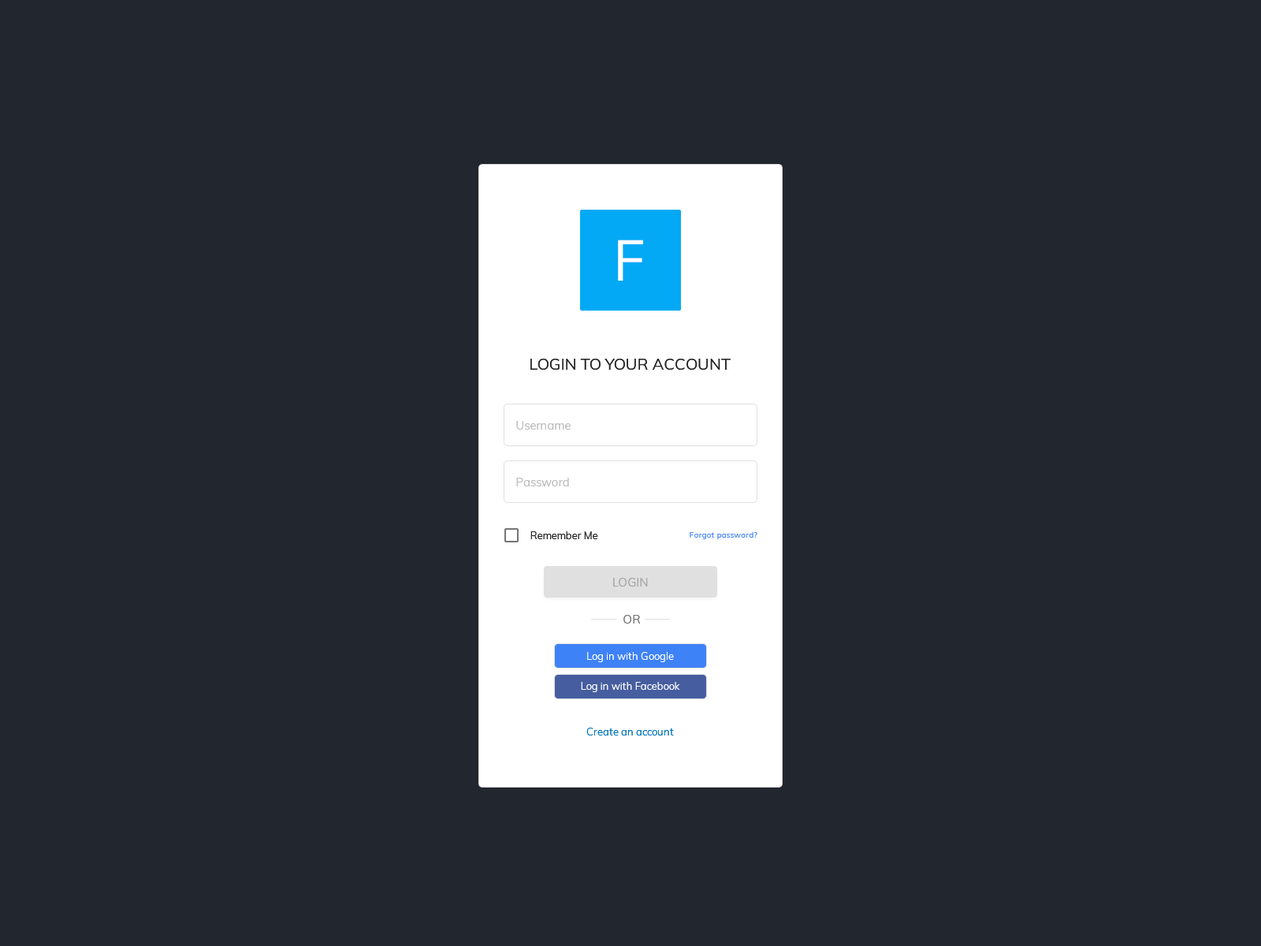
<style>
.page{position:relative;width:1261px;height:946px;background:#22262f}
.page>*{position:absolute;margin:0}
.t1{font:56.7px "Muli-Regular";color:#ffffff}
.t2{font:15.8px "Muli-Regular";color:#212121}
.t3{font:11.8px "Muli-Regular";color:#bdbdbd}
.t4{font:10.2px "Muli-Regular";color:#212121}
.t5{font:7.9px "Muli-Regular";color:#3e82f7}
.t6{font:11.8px "Muli-Regular";color:#a6a6a6}
.t7{font:11.8px "Muli-Regular";color:#757575}
.t8{font:10.2px "Muli-Regular";color:#ffffff}
.t9{font:10.2px "Muli-Regular";color:#0277bd}
</style>
<div class="page">
<p class="t1" style="left:618px;top:240px;width:25px;height:41px">F</p>
<p class="t2" style="left:530px;top:359px;width:201px;height:11px">LOGIN TO YOUR ACCOUNT</p>
<p class="t3" style="left:516px;top:421px;width:55px;height:8px">Username</p>
<p class="t3" style="left:516px;top:478px;width:53px;height:8px">Password</p>
<p class="t4" style="left:530px;top:531px;width:68px;height:8px">Remember Me</p>
<p class="t5" style="left:690px;top:532px;width:67px;height:7px">Forgot password?</p>
<p class="t6" style="left:613px;top:578px;width:35px;height:8px">LOGIN</p>
<p class="t7" style="left:623px;top:615px;width:17px;height:8px">OR</p>
<p class="t8" style="left:587px;top:652px;width:87px;height:10px">Log in with Google</p>
<p class="t8" style="left:581px;top:682px;width:99px;height:10px">Log in with Facebook</p>
<p class="t9" style="left:586px;top:727px;width:88px;height:8px">Create an account</p>
</div>
